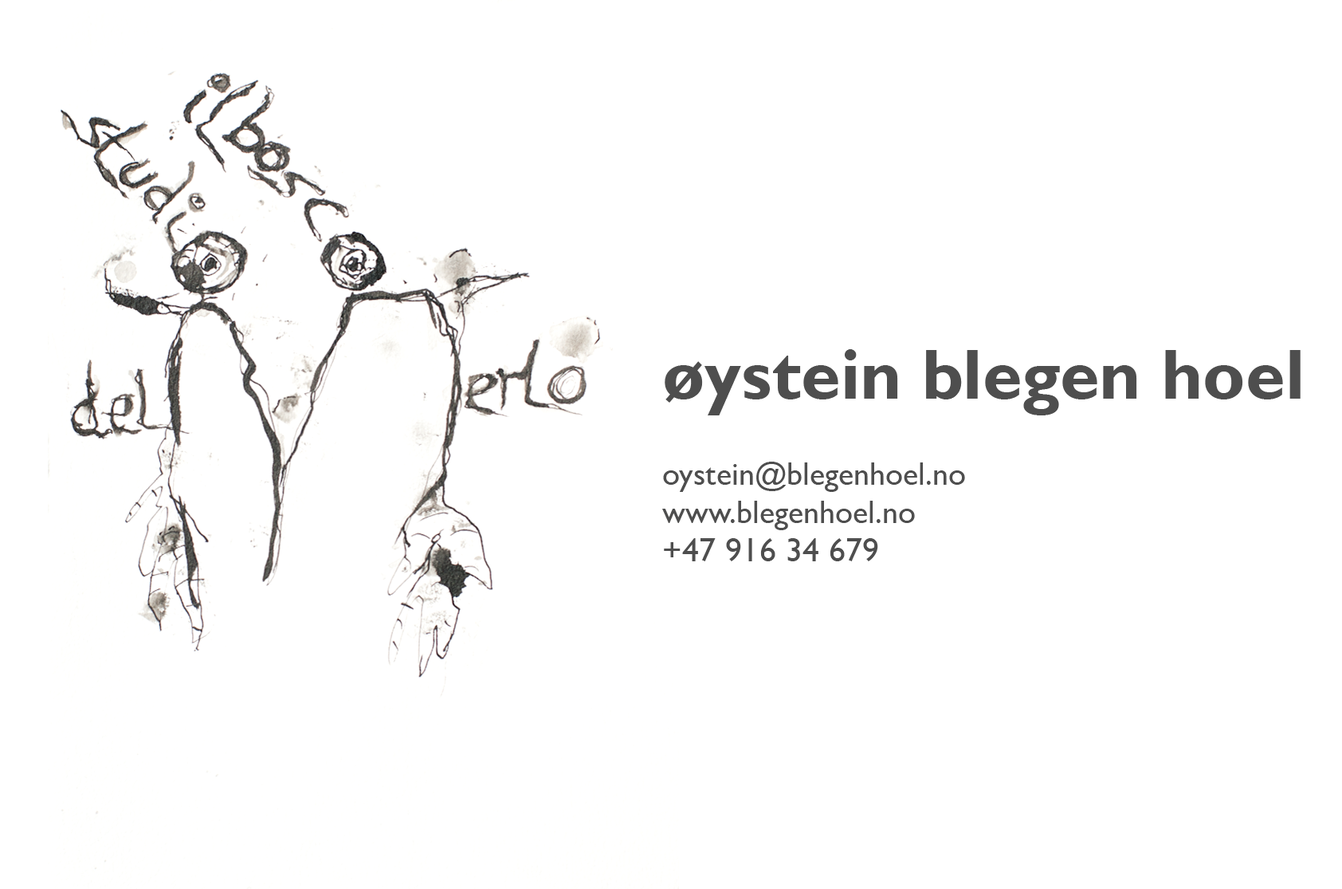
<style>
.page{position:relative;width:1342px;height:889px;background:#ffffff}
.page>*{position:absolute;margin:0}
.t1{font:71.7px "GillSansMT-Bold";color:#4b4b4b}
.t2{font:31.9px "GillSansMT";color:#4b4b4b}
.t3{font:33.8px "GillSansMT";color:#4b4b4b}
</style>
<div class="page">
<p class="t1" style="left:665px;top:349px;width:636px;height:66px">øystein blegen hoel</p>
<p class="t2" style="left:662px;top:461px;width:303px;height:100px">oystein@blegenhoel.no <br>www.blegenhoel.no<br><span class="t3">+47 916 34 679</span></p>
</div>
